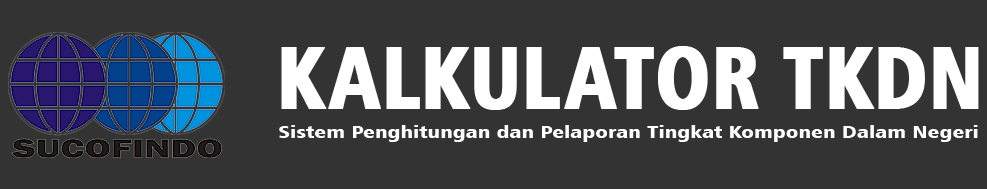
<style>
.page{position:relative;width:987px;height:189px;background:#333333}
.page>*{position:absolute;margin:0}
.t1{font:87.8px "Humanist777BT-BlackCondensedB";color:#ffffff;text-transform:uppercase;font-weight:bold;scale:0.92 1}
.t2{font:17.1px "Humanist777BT-BlackCondensedB";color:#ffffff;scale:1.35 1}
</style>
<div class="page">
<p class="t1" style="left:281px;top:46px;width:698px;height:64px">Kalkulator TKDN</p>
<p class="t2" style="left:279px;top:125px;width:699px;height:17px">Sistem Penghitungan dan Pelaporan Tingkat Komponen Dalam Negeri</p>
</div>
